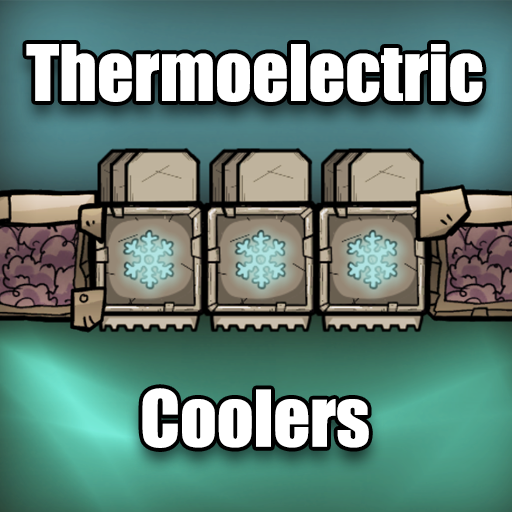
<style>
.page{position:relative;width:512px;height:512px}
.page>*{position:absolute;margin:0}
.t1{font:72px "Impact";color:#ffffff}
</style>
<div class="page">
<p class="t1" style="left:26px;top:44px;width:457px;height:404px;text-align:center">Thermoelectric<br><br><br><br>Coolers</p>
</div>
